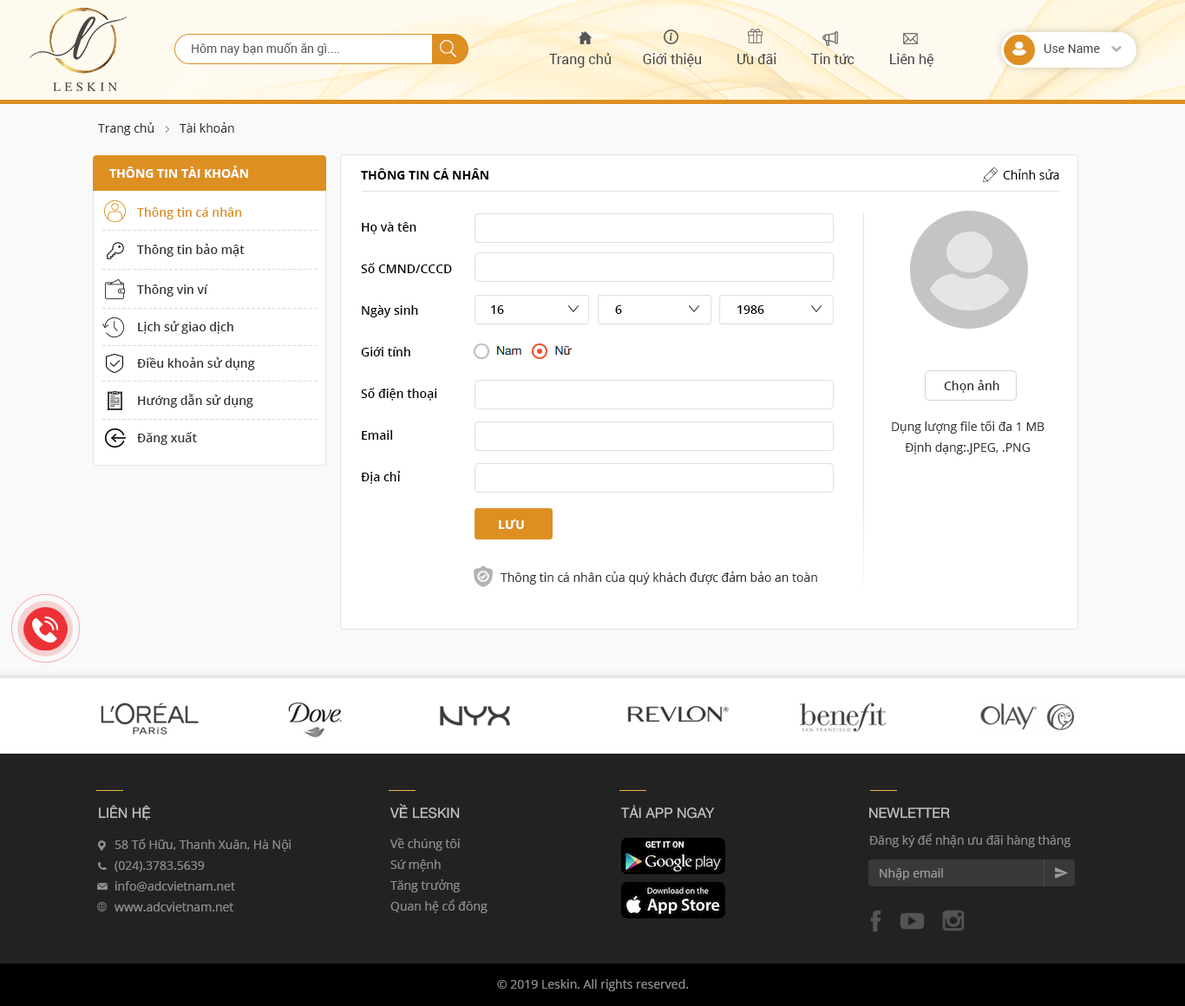
<style>
.page{position:relative;width:1185px;height:1006px;background:#ffffff}
.page>*{position:absolute;margin:0}
.t1{font:12.1px "Roboto-Regular";color:#595959}
.t2{font:13.9px "Roboto-Regular";color:#464646}
.t3{font:12.1px "Roboto-Regular";color:#464646}
.t4{font:12.1px "OpenSans";color:#333333}
.t5{font:12.1px "OpenSans-Bold";color:#ffffff;text-transform:uppercase}
.t6{font:12.1px "OpenSans-Bold";color:#000000;text-transform:uppercase}
.t7{font:12.1px "OpenSans";color:#000000}
.t8{font:12.1px "OpenSans-Semibold";color:#dd8f22}
.t9{font:13.9px "OpenSans-Light";letter-spacing:0.05em;color:#d9d9d9}
.t10{font:12.1px/41.6px "OpenSans-Semibold";color:#000000}
.t11{font:12.1px "OpenSans-Semibold";color:#333333}
.t12{font:12.1px "OpenSans-Semibold";color:#000000}
.t13{font:12.1px/20.8px "OpenSans";color:#333333}
.t14{font:13.9px "HelveticaNeue";color:#c4c4c4;text-transform:uppercase}
.t15{font:12.1px "OpenSans";color:#8c8c8c}
.t16{font:12.1px/20.8px "OpenSans";color:#8c8c8c}
.t17{font:12.1px "OpenSans";color:#9c9c9c}
</style>
<div class="page">
<p class="t1" style="left:192px;top:43px;width:147px;height:13px">Hôm nay bạn muốn ăn gì....</p>
<p class="t2" style="left:549px;top:53px;width:384px;height:15px">Trang chủ         Giới thiệu          Ưu đãi          Tin tức          Liên hệ</p>
<p class="t3" style="left:1044px;top:44px;width:56px;height:9px">Use Name</p>
<p class="t4" style="left:98px;top:122px;width:136px;height:13px">Trang chủ        Tài khoản</p>
<p class="t5" style="left:109px;top:166px;width:139px;height:12px">Thông tin tài khoản</p>
<p class="t6" style="left:361px;top:168px;width:127px;height:12px">Thông tin cá nhân</p>
<p class="t7" style="left:1003px;top:169px;width:56px;height:11px">Chỉnh sửa</p>
<p class="t8" style="left:137px;top:207px;width:105px;height:12px">Thông tin cá nhân</p>
<p class="t9" style="left:101px;top:230px;width:216px;height:1px">------------------------------------------</p>
<p class="t10" style="left:361px;top:222px;width:91px;height:262px">Họ và tên<br>Số CMND/CCCD<br>Ngày sinh<br>Giới tính<br>Số điện thoại<br>Email<br>Địa chỉ</p>
<p class="t11" style="left:137px;top:244px;width:108px;height:13px">Thông tin bảo mật</p>
<p class="t9" style="left:101px;top:269px;width:216px;height:1px">------------------------------------------</p>
<p class="t11" style="left:137px;top:285px;width:71px;height:12px">Thông vin ví</p>
<p class="t12" style="left:491px;top:305px;width:13px;height:9px">16</p>
<p class="t12" style="left:615px;top:305px;width:7px;height:9px">6</p>
<p class="t12" style="left:737px;top:305px;width:27px;height:9px">1986</p>
<p class="t9" style="left:101px;top:308px;width:216px;height:1px">------------------------------------------</p>
<p class="t11" style="left:138px;top:321px;width:95px;height:13px">Lịch sử giao dịch</p>
<p class="t9" style="left:101px;top:345px;width:216px;height:1px">------------------------------------------</p>
<p class="t11" style="left:137px;top:357px;width:118px;height:13px">Điều khoản sử dụng</p>
<p class="t9" style="left:101px;top:381px;width:216px;height:1px">------------------------------------------</p>
<p class="t11" style="left:944px;top:380px;width:55px;height:13px">Chọn ảnh</p>
<p class="t11" style="left:138px;top:394px;width:115px;height:14px">Hướng dẫn sử dụng</p>
<p class="t9" style="left:101px;top:419px;width:216px;height:1px">------------------------------------------</p>
<p class="t13" style="left:892px;top:421px;width:152px;height:34px;text-align:center">Dụng lượng file tối đa 1 MB<br>Định dạng:.JPEG, .PNG</p>
<p class="t11" style="left:137px;top:432px;width:60px;height:13px">Đăng xuất</p>
<p class="t5" style="left:499px;top:520px;width:25px;height:9px">Lưu</p>
<p class="t4" style="left:501px;top:572px;width:316px;height:13px">Thông tin cá nhân của quý khách được đảm bảo an toàn</p>
<p class="t14" style="left:99px;top:805px;width:52px;height:16px">Liên hệ</p>
<p class="t14" style="left:390px;top:803px;width:70px;height:16px">về leskin</p>
<p class="t14" style="left:621px;top:805px;width:94px;height:14px">Tải App ngay</p>
<p class="t14" style="left:869px;top:808px;width:81px;height:11px">newletter</p>
<p class="t15" style="left:869px;top:834px;width:201px;height:14px">Đăng ký để nhận ưu đãi hàng tháng</p>
<p class="t16" style="left:115px;top:839px;width:176px;height:73px">58 Tố Hữu, Thanh Xuân, Hà Nội<br>(024).3783.5639<br>info@adcvietnam.net <br>www.adcvietnam.net</p>
<p class="t16" style="left:390px;top:838px;width:98px;height:75px">Về chúng tôi<br>Sứ mệnh<br>Tăng trưởng<br>Quan hệ cổ đông</p>
<p class="t17" style="left:880px;top:868px;width:63px;height:12px">Nhập email</p>
<p class="t15" style="left:497px;top:979px;width:191px;height:13px">© 2019 Leskin. All rights reserved.</p>
</div>
